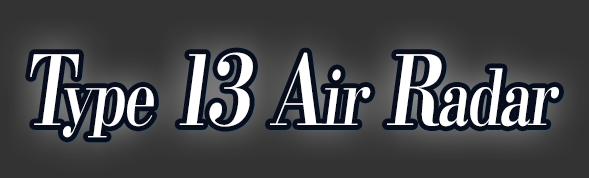
<style>
.page{position:relative;width:589px;height:178px;background:#333333}
.page>*{position:absolute;margin:0}
.t1{font:96px "KochoStd-Heavy";letter-spacing:-0.04em;color:#ffffff;font-style:italic;scale:0.75 1}
.t2{font:76.8px "KochoStd-Heavy";letter-spacing:-0.04em;color:#ffffff;font-style:italic;scale:0.75 1}
</style>
<div class="page">
<p class="t1" style="left:30px;top:52px;width:529px;height:86px">T<span class="t2">ype </span>13 A<span class="t2">ir</span> R<span class="t2">adar</span></p>
</div>
